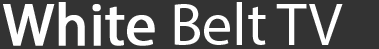
<style>
.page{position:relative;width:379px;height:49px;background:#333333}
.page>*{position:absolute;margin:0}
.t1{font:60px "MyriadPro-Regular";color:#ffffff}
.t2{font:60px "MyriadPro-Regular";color:#ffffff;font-weight:bold}
</style>
<div class="page">
<p class="t1" style="left:3px;top:2px;width:340px;height:44px"><span class="t2">White</span> Belt TV</p>
</div>
